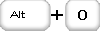
<style>
.page{position:relative;width:100px;height:31px;background:#ffffff}
.page>*{position:absolute;margin:0}
.t1{font:9.9px "ArialMT";color:#000000;scale:1.42 1}
.t2{font:13.2px "ArialMT";color:#000000;scale:1.42 1}
</style>
<div class="page">
<p class="t1" style="left:10px;top:11px;width:15px;height:7px">Alt</p>
<p class="t2" style="left:78px;top:10px;width:9px;height:10px">0</p>
</div>
